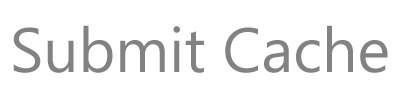
<style>
.page{position:relative;width:400px;height:100px;background:#ffffff}
.page>*{position:absolute;margin:0}
.t1{font:62.5px "Gadugi";color:#828282}
</style>
<div class="page">
<p class="t1" style="left:13px;top:25px;width:375px;height:48px">Submit Cache</p>
</div>
